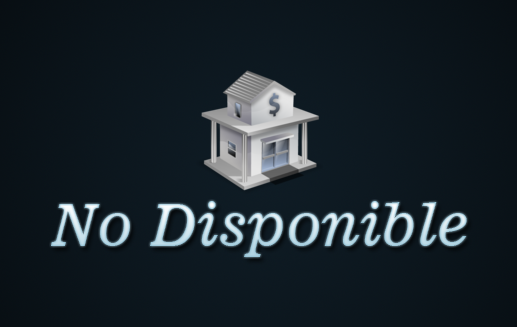
<style>
.page{position:relative;width:517px;height:327px}
.page>*{position:absolute;margin:0}
.t1{font:58px "News701BT-ItalicA"}
</style>
<div class="page">
<p class="t1" style="left:51px;top:201px;width:416px;height:56px">No Disponible</p>
</div>
